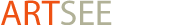
<style>
.page{position:relative;width:188px;height:25px;background:#ffffff}
.page>*{position:absolute;margin:0}
.t1{font:36px "MyriadPro-Regular";color:#ee5113}
.t2{font:36px "MyriadPro-Regular";color:#b1b197}
</style>
<div class="page">
<p class="t1" style="left:1px;top:0px;width:111px;height:25px">ART<span class="t2">SEE</span></p>
</div>
